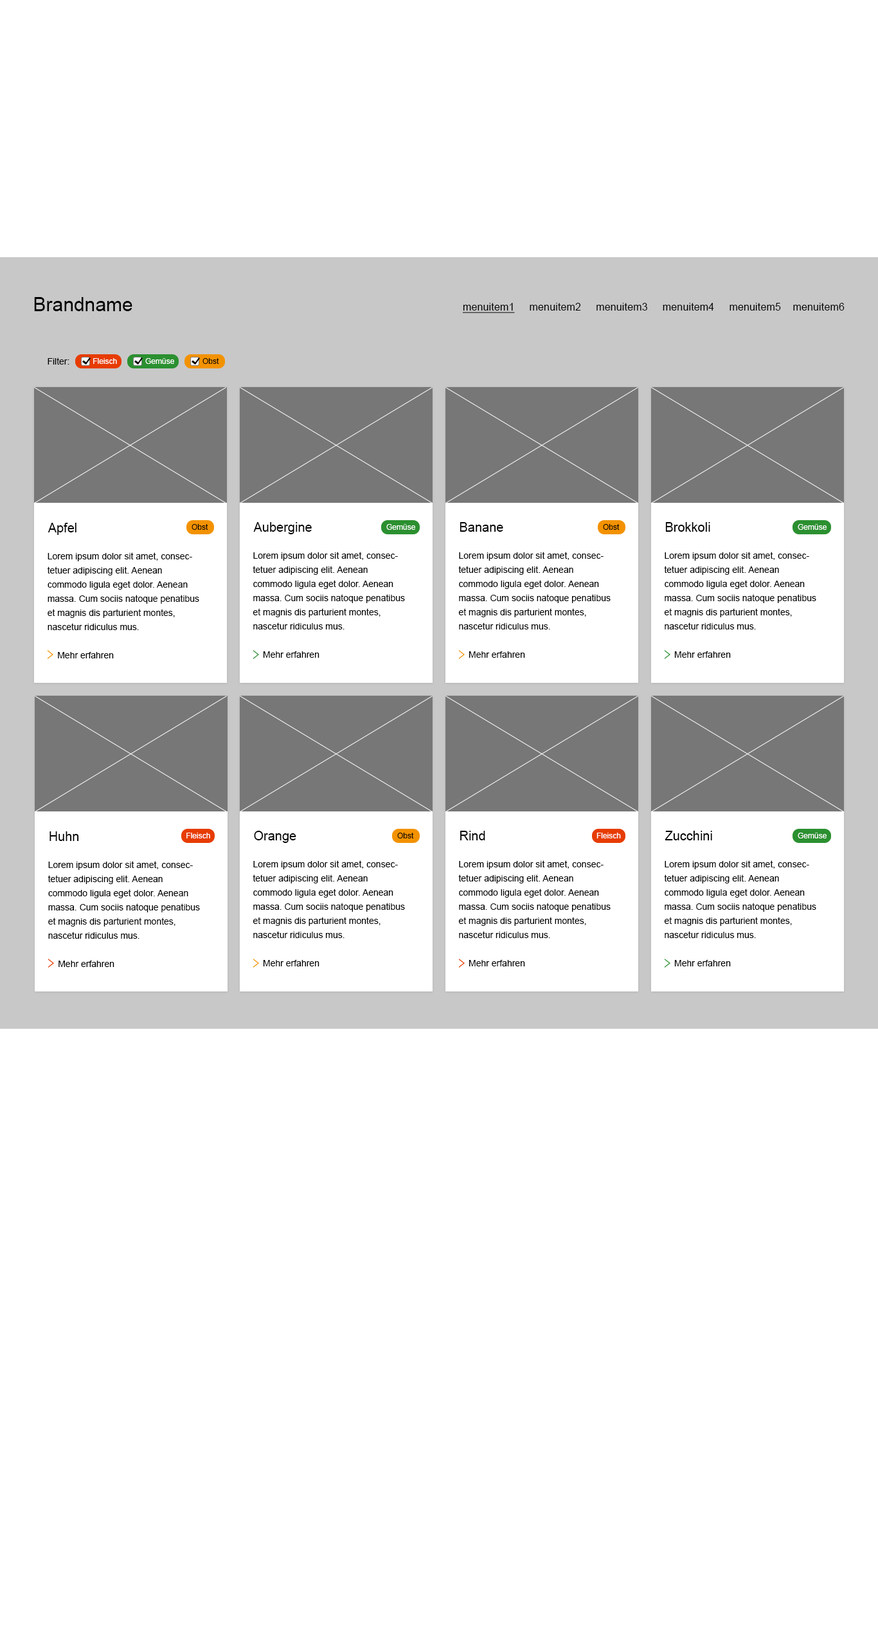
<style>
.page{position:relative;width:878px;height:1646px;background:#ffffff}
.page>*{position:absolute;margin:0}
.t1{font:19.3px "ArialMT";color:#000000}
.t2{font:10.3px "ArialMT";letter-spacing:0.01em;color:#000000}
.t3{font:10.3px "ArialMT";letter-spacing:0.01em;color:#000000;text-decoration:underline}
.t4{font:9px "ArialMT";color:#000000}
.t5{font:7.7px "ArialMT";color:#ffffff}
.t6{font:7.7px "ArialMT";color:#000000}
.t7{font:12.8px "ArialMT";color:#000000}
.t8{font:12.9px "ArialMT";color:#000000}
.t9{font:9px/14.1px "ArialMT";color:#000000}
</style>
<div class="page">
<p class="t1" style="left:34px;top:297px;width:98px;height:14px">Brandname</p>
<p class="t2" style="left:462px;top:303px;width:383px;height:10px"><span class="t3">menuitem1    </span> menuitem2     menuitem3     menuitem4     menuitem5    menuitem6</p>
<p class="t4" style="left:48px;top:357px;width:21px;height:7px">Filter:</p>
<p class="t5" style="left:93px;top:358px;width:24px;height:6px"><span class="t6"> </span>Fleisch</p>
<p class="t5" style="left:145px;top:358px;width:29px;height:6px">Gemüse</p>
<p class="t6" style="left:203px;top:358px;width:16px;height:6px">Obst</p>
<p class="t7" style="left:48px;top:523px;width:28px;height:12px">Apfel</p>
<p class="t6" style="left:192px;top:524px;width:16px;height:6px">Obst</p>
<p class="t8" style="left:253px;top:522px;width:59px;height:12px">Aubergine</p>
<p class="t5" style="left:386px;top:524px;width:29px;height:6px">Gemüse</p>
<p class="t8" style="left:460px;top:522px;width:43px;height:10px">Banane</p>
<p class="t6" style="left:603px;top:524px;width:17px;height:6px">Obst</p>
<p class="t8" style="left:665px;top:522px;width:45px;height:10px">Brokkoli</p>
<p class="t5" style="left:798px;top:524px;width:29px;height:6px">Gemüse</p>
<p class="t9" style="left:47px;top:552px;width:152px;height:106px">Lorem ipsum dolor sit amet, consectetuer adipiscing elit. Aenean commodo ligula eget dolor. Aenean massa. Cum sociis natoque penatibus et magnis dis parturient montes, nascetur ridiculus mus.<br><br>    Mehr erfahren</p>
<p class="t9" style="left:253px;top:552px;width:152px;height:106px">Lorem ipsum dolor sit amet, consectetuer adipiscing elit. Aenean commodo ligula eget dolor. Aenean massa. Cum sociis natoque penatibus et magnis dis parturient montes, nascetur ridiculus mus.<br><br>    Mehr erfahren</p>
<p class="t9" style="left:458px;top:552px;width:153px;height:106px">Lorem ipsum dolor sit amet, consectetuer adipiscing elit. Aenean commodo ligula eget dolor. Aenean massa. Cum sociis natoque penatibus et magnis dis parturient montes, nascetur ridiculus mus.<br><br>    Mehr erfahren</p>
<p class="t9" style="left:664px;top:552px;width:152px;height:106px">Lorem ipsum dolor sit amet, consectetuer adipiscing elit. Aenean commodo ligula eget dolor. Aenean massa. Cum sociis natoque penatibus et magnis dis parturient montes, nascetur ridiculus mus.<br><br>    Mehr erfahren</p>
<p class="t7" style="left:50px;top:831px;width:29px;height:10px">Huhn</p>
<p class="t5" style="left:186px;top:833px;width:24px;height:5px"><span class="t6"> </span>Fleisch</p>
<p class="t8" style="left:254px;top:831px;width:42px;height:12px">Orange</p>
<p class="t6" style="left:397px;top:833px;width:17px;height:5px">Obst</p>
<p class="t8" style="left:460px;top:831px;width:25px;height:9px">Rind</p>
<p class="t5" style="left:597px;top:833px;width:24px;height:5px">Fleisch</p>
<p class="t8" style="left:665px;top:831px;width:47px;height:9px">Zucchini</p>
<p class="t5" style="left:798px;top:833px;width:29px;height:5px">Gemüse</p>
<p class="t9" style="left:48px;top:861px;width:152px;height:106px">Lorem ipsum dolor sit amet, consectetuer adipiscing elit. Aenean commodo ligula eget dolor. Aenean massa. Cum sociis natoque penatibus et magnis dis parturient montes, nascetur ridiculus mus.<br><br>    Mehr erfahren</p>
<p class="t9" style="left:253px;top:860px;width:152px;height:106px">Lorem ipsum dolor sit amet, consectetuer adipiscing elit. Aenean commodo ligula eget dolor. Aenean massa. Cum sociis natoque penatibus et magnis dis parturient montes, nascetur ridiculus mus.<br><br>    Mehr erfahren</p>
<p class="t9" style="left:458px;top:860px;width:153px;height:106px">Lorem ipsum dolor sit amet, consectetuer adipiscing elit. Aenean commodo ligula eget dolor. Aenean massa. Cum sociis natoque penatibus et magnis dis parturient montes, nascetur ridiculus mus.<br><br>    Mehr erfahren</p>
<p class="t9" style="left:664px;top:860px;width:152px;height:106px">Lorem ipsum dolor sit amet, consectetuer adipiscing elit. Aenean commodo ligula eget dolor. Aenean massa. Cum sociis natoque penatibus et magnis dis parturient montes, nascetur ridiculus mus.<br><br>    Mehr erfahren</p>
</div>
